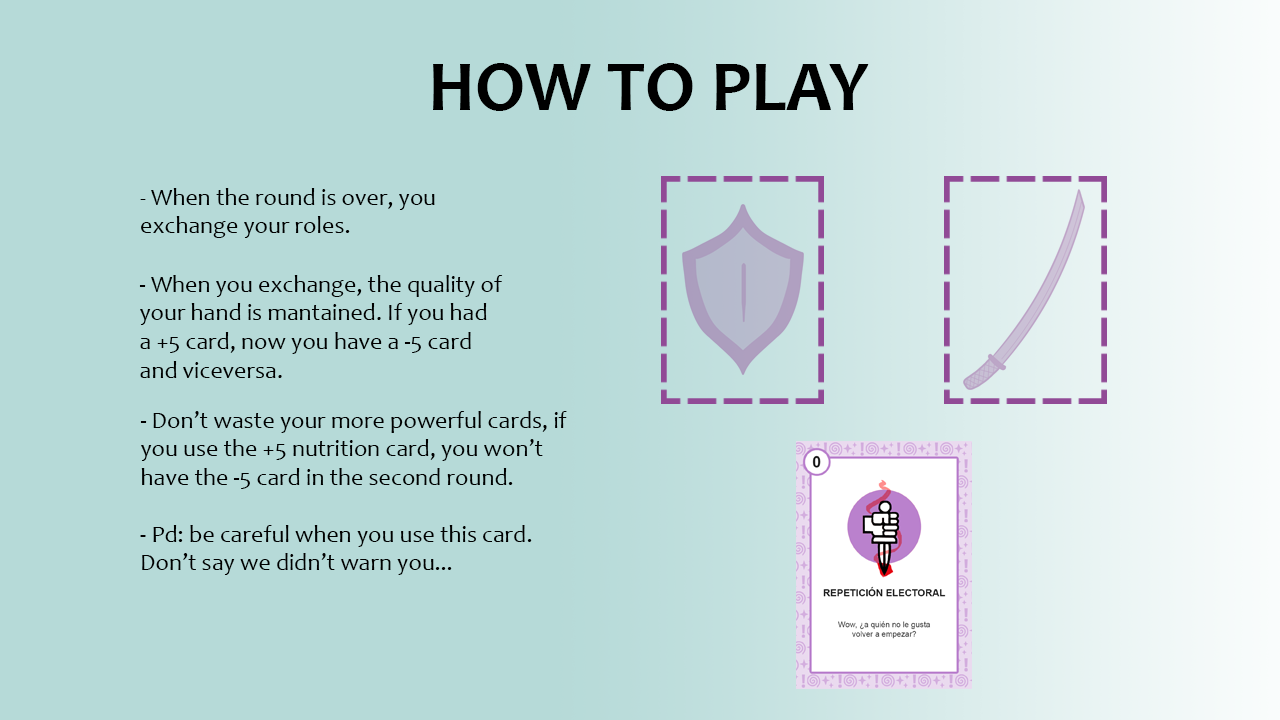
<style>
.page{position:relative;width:1280px;height:720px;background:#b6dad8}
.page>*{position:absolute;margin:0}
.t1{font:72px "Candara-Bold";color:#000000}
.t2{font:24px "Candara";color:#000000}
.t3{font:24px "Candara-Italic";color:#000000}
</style>
<div class="page">
<p class="t1" style="left:433px;top:63px;width:436px;height:48px">HOW TO PLAY</p>
<p class="t2" style="left:140px;top:188px;width:295px;height:50px"><span class="t3">- </span>When the round is over, you exchange your roles.</p>
<p class="t2" style="left:139px;top:275px;width:364px;height:103px">- When you exchange, the quality of your hand is mantained. If you had a +5 card, now you have a -5 card and viceversa.</p>
<p class="t2" style="left:140px;top:411px;width:427px;height:78px">- Don’t waste your more powerful cards, if you use the +5 nutrition card, you won’t have the -5 card in the second round.</p>
<p class="t2" style="left:140px;top:525px;width:392px;height:50px">- Pd: be careful when you use this card. Don’t say we didn’t warn you...</p>
</div>
